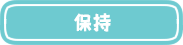
<style>
.page{position:relative;width:183px;height:45px;background:#6ecad0}
.page>*{position:absolute;margin:0}
.t1{font:12px "shetumodengxiaofangti";color:#ffffff;font-weight:bold;scale:0.94 1}
</style>
<div class="page">
<p class="t1" style="left:74px;top:13px;width:37px;height:19px">保持</p>
</div>
